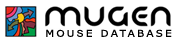
<style>
.page{position:relative;width:177px;height:43px;background:#ffffff}
.page>*{position:absolute;margin:0}
.t1{font:9.4px "Verdana";letter-spacing:0.22em;color:#000000;scale:1.11 1}
.t2{font:9.4px "ArialMT";letter-spacing:0.22em;color:#000000;scale:1.11 1}
</style>
<div class="page">
<p class="t1" style="left:46px;top:29px;width:126px;height:8px">M<span class="t2">OUS</span>E DATABASE</p>
</div>
